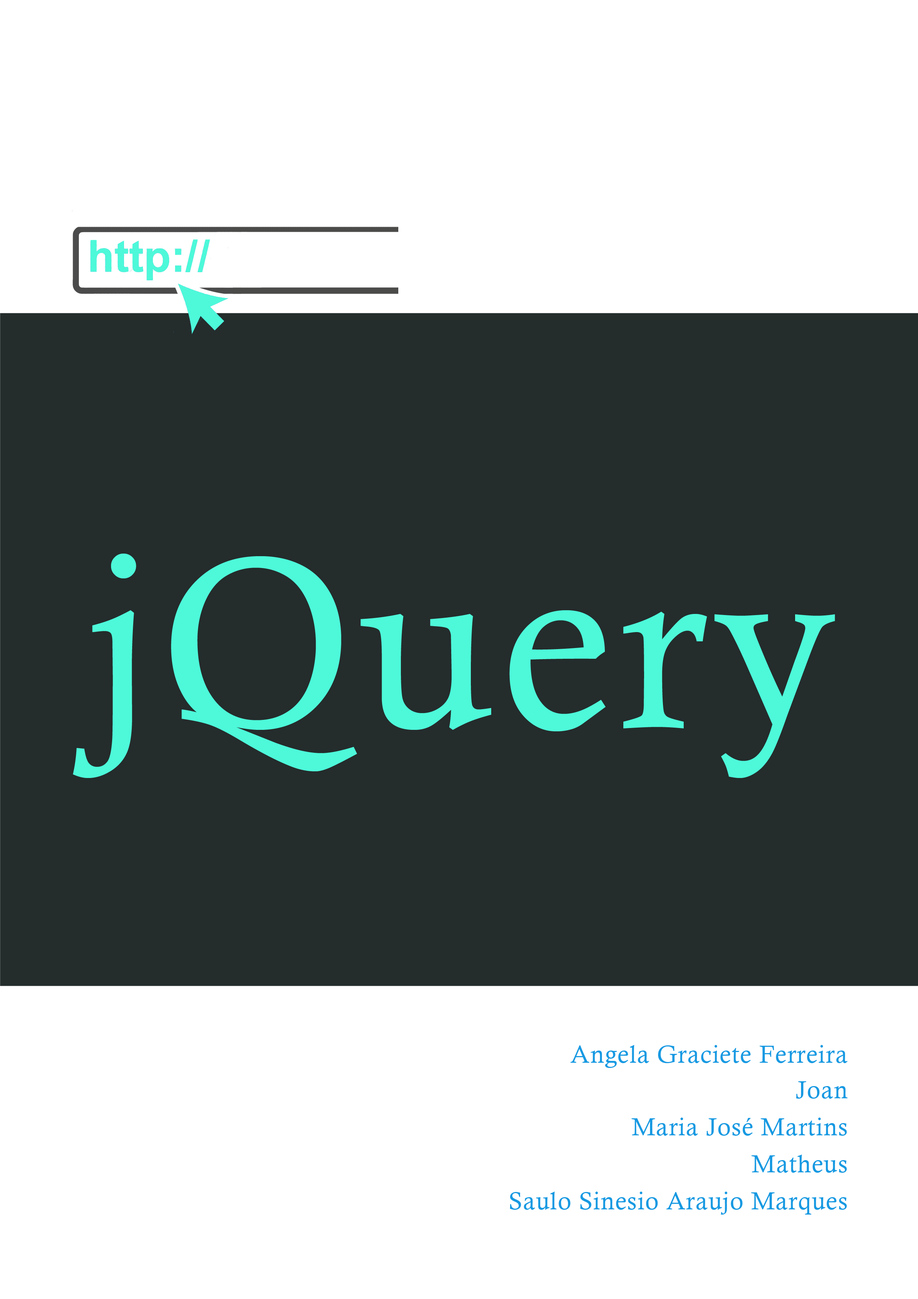
<style>
.page{position:relative;width:918px;height:1299px;background:#242c2c}
.page>*{position:absolute;margin:0}
.t1{font:243px "CalistoMT";letter-spacing:0.03em;color:#4df9d9}
.t2{font:24.7px "CalistoMT";letter-spacing:0.03em;color:#1799e2}
</style>
<div class="page">
<p class="t1" style="left:73px;top:553px;width:762px;height:225px">jQuery</p>
<p class="t2" style="left:571px;top:1045px;width:277px;height:23px">Angela Graciete Ferreira</p>
<p class="t2" style="left:796px;top:1081px;width:52px;height:17px">Joan</p>
<p class="t2" style="left:632px;top:1117px;width:215px;height:18px">Maria José Martins</p>
<p class="t2" style="left:752px;top:1154px;width:95px;height:18px">Matheus</p>
<p class="t2" style="left:510px;top:1191px;width:337px;height:23px">Saulo Sinesio Araujo Marques</p>
</div>
